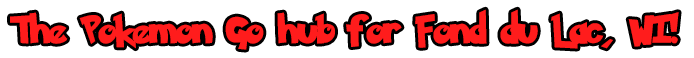
<style>
.page{position:relative;width:694px;height:58px;background:#ffffff}
.page>*{position:absolute;margin:0}
.t1{font:32px "PokemonSolidNormal";color:#ff1c1c}
</style>
<div class="page">
<p class="t1" style="left:10px;top:9px;width:669px;height:41px">The Pokemon Go hub for Fond du Lac, WI!</p>
</div>
